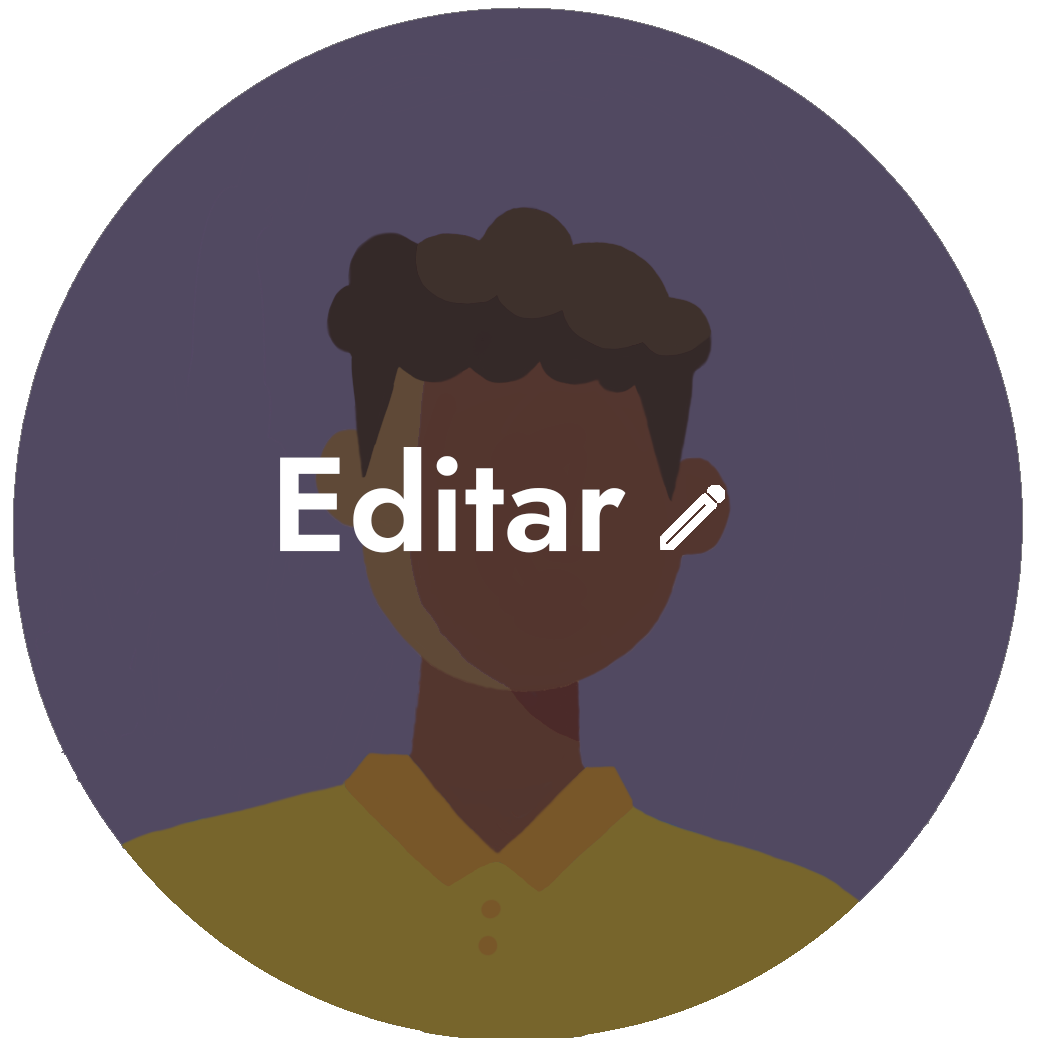
<style>
.page{position:relative;width:1038px;height:1038px;background:#514961}
.page>*{position:absolute;margin:0}
.t1{font:133.3px "Jost-SemiBold";color:#ffffff}
</style>
<div class="page">
<p class="t1" style="left:280px;top:447px;width:346px;height:106px">Editar</p>
</div>
